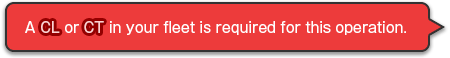
<style>
.page{position:relative;width:450px;height:58px;background:#ed3b3b}
.page>*{position:absolute;margin:0}
.t1{font:14px "GothicMB101Pro-Regular";color:#ffffff}
.t2{font:14px "GothicMB101Pro-Regular";color:#ffd3d3}
</style>
<div class="page">
<p class="t1" style="left:25px;top:21px;width:381px;height:14px">A <span class="t2">CL</span> or <span class="t2">CT</span> in your fleet is required for this operation.</p>
<p class="t1" style="left:25px;top:21px;width:381px;height:14px">A <span class="t2">CL</span> or <span class="t2">CT</span> in your fleet is required for this operation.</p>
</div>
